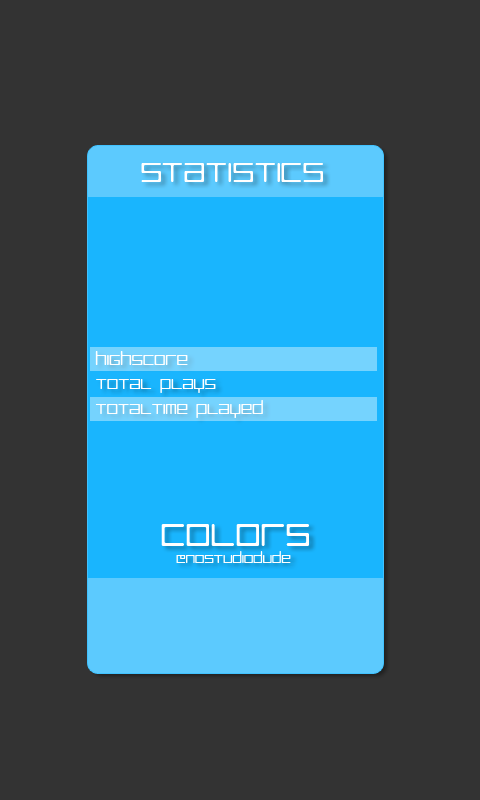
<style>
.page{position:relative;width:480px;height:800px;background:#333333}
.page>*{position:absolute;margin:0}
.t1{font:35px "LuggageRoundLight";letter-spacing:-0.02em;color:#ffffff}
.t2{font:18px "LuggageRoundLight";letter-spacing:-0.02em;color:#ffffff}
.t3{font:40px "LuggageRoundLight";letter-spacing:-0.02em;color:#ffffff}
.t4{font:15px "LuggageRoundLight";letter-spacing:-0.02em;color:#ffffff}
</style>
<div class="page">
<p class="t1" style="left:141px;top:163px;width:182px;height:19px">statistics</p>
<p class="t2" style="left:95px;top:351px;width:93px;height:14px">highscore</p>
<p class="t2" style="left:96px;top:379px;width:120px;height:14px">total plays</p>
<p class="t2" style="left:95px;top:400px;width:168px;height:18px">totaltime played</p>
<p class="t3" style="left:161px;top:524px;width:148px;height:22px">colors</p>
<p class="t4" style="left:176px;top:551px;width:115px;height:12px">@nostudiodude</p>
</div>
